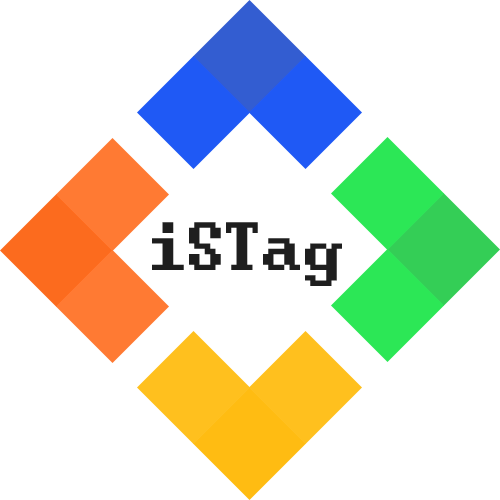
<style>
.page{position:relative;width:500px;height:500px;background:#ffffff}
.page>*{position:absolute;margin:0}
.t1{font:84.7px "Windows-Command-Prompt";color:#1e1e1e}
</style>
<div class="page">
<p class="t1" style="left:152px;top:222px;width:190px;height:64px">iSTag</p>
</div>
